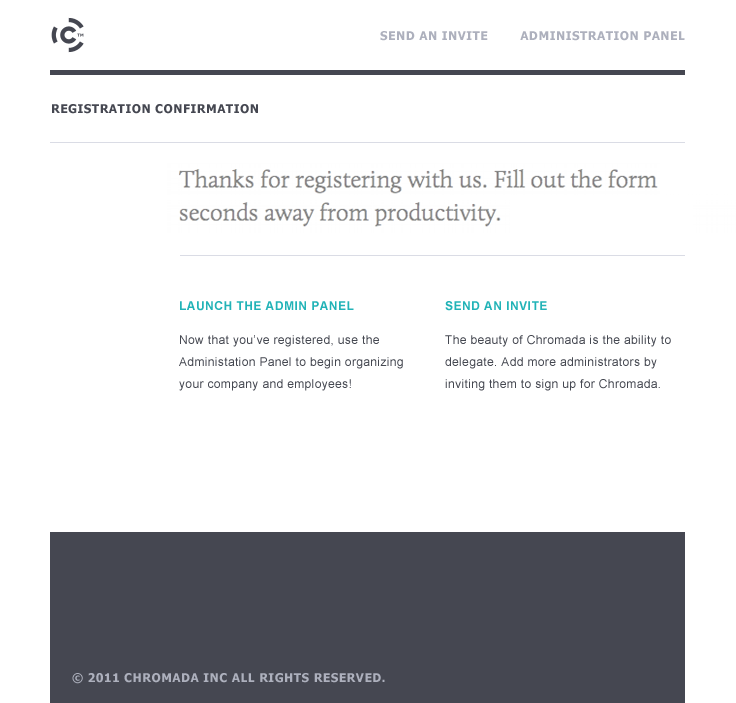
<style>
.page{position:relative;width:736px;height:703px;background:#ffffff}
.page>*{position:absolute;margin:0}
.t1{font:12px "Tahoma-Bold";letter-spacing:0.04em;color:#adb1bd}
.t2{font:12px "Tahoma-Bold";letter-spacing:0.04em;color:#454851}
.t3{font:12px/22px "ArialMT";letter-spacing:0.03em;color:#454851}
.t4{font:12px/31px "Arial-BoldMT";letter-spacing:0.04em;color:#22b3b8}
</style>
<div class="page">
<p class="t1" style="left:380px;top:31px;width:305px;height:10px">SEND AN INVITE        ADMINISTRATION PANEL</p>
<p class="t2" style="left:52px;top:104px;width:206px;height:10px">REGISTRATION CONFIRMATION</p>
<p class="t3" style="left:179px;top:301px;width:224px;height:90px"><span class="t4">LAUNCH THE ADMIN PANEL<br> </span><br>Now that you’ve registered, use the Administation Panel to begin organizing your company and employees!</p>
<p class="t3" style="left:445px;top:301px;width:226px;height:90px"><span class="t4">SEND AN INVITE<br> </span><br>The beauty of Chromada is the ability to delegate. Add more administrators by inviting them to sign up for Chromada.</p>
<p class="t1" style="left:72px;top:673px;width:313px;height:11px">© 2011 CHROMADA INC ALL RIGHTS RESERVED.</p>
</div>
